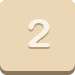
<style>
.page{position:relative;width:75px;height:75px;background:#ebd6b6}
.page>*{position:absolute;margin:0}
.t1{font:39.1px "ArialRoundedMTBold";color:#faf2e6;scale:1.11 1}
</style>
<div class="page">
<p class="t1" style="left:28px;top:19px;width:22px;height:28px">2</p>
</div>
